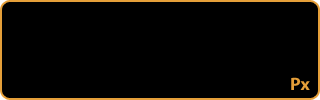
<style>
.page{position:relative;width:320px;height:100px;background:#000000}
.page>*{position:absolute;margin:0}
.t1{font:18px "MyriadPro-Bold";color:#e59f39}
</style>
<div class="page">
<p class="t1" style="left:291px;top:77px;width:19px;height:13px">Px</p>
</div>
